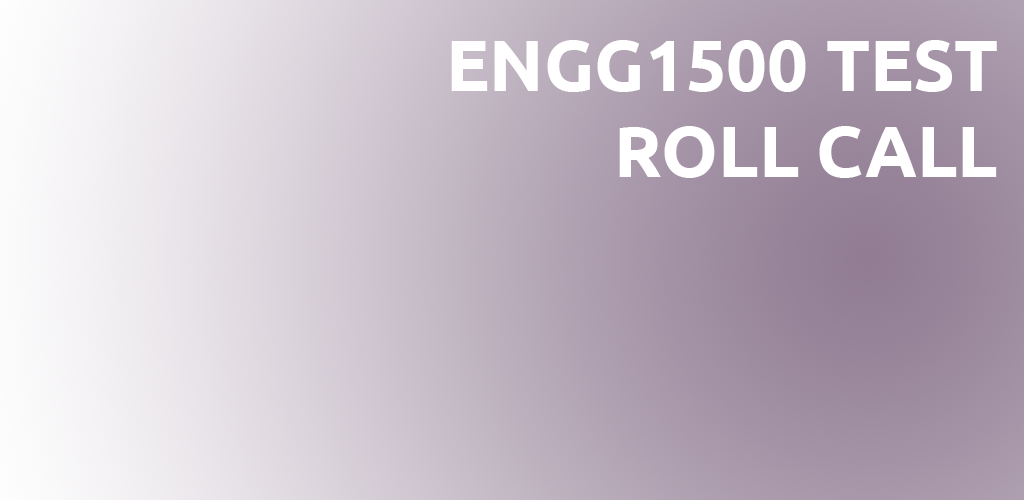
<style>
.page{position:relative;width:1024px;height:500px}
.page>*{position:absolute;margin:0}
.t1{font:72px "Ubuntu-Bold";color:#ffffff}
</style>
<div class="page">
<p class="t1" style="left:451px;top:40px;width:546px;height:138px">ENGG1500 TEST<br>ROLL CALL</p>
</div>
